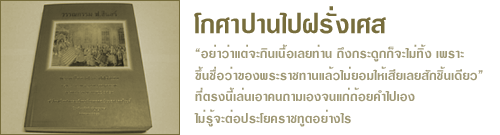
<style>
.page{position:relative;width:500px;height:135px;background:#ffffff}
.page>*{position:absolute;margin:0}
.t1{font:36px "DSELardPhrao";letter-spacing:0.01em;color:#776d3c}
.t2{font:18px "DSELardPhrao";letter-spacing:0.01em;color:#a09976}
</style>
<div class="page">
<p class="t1" style="left:194px;top:6px;width:192px;height:28px">â¡ÈÒ»Ò¹ä»½ÃÑè§àÈÊ</p>
<p class="t2" style="left:194px;top:44px;width:289px;height:83px">“ÍÂèÒÇèÒáµè¨Ð¡Ô¹à¹×éÍàÅÂ·èÒ¹ ¶Ö§¡ÃÐ´Ù¡¡ç¨ÐäÁè·Ôé§ à¾ÃÒÐ<br>¢Öé¹ª×èÍÇèÒ¢Í§¾ÃÐÃÒª·Ò¹áÅéÇäÁèÂÍÁãËéàÊÕÂàÅÂÊÑ¡ªÔé¹à´ÕÂÇ” <br>·ÕèµÃ§¹ÕéàÅè¹àÍÒ¤¹¶ÒÁàÍ§¨¹á¡è¶éÍÂ¤Óä»àÍ§ <br>äÁèÃÙé¨ÐµèÍ»ÃÐâÂ¤ÃÒª·ÙµÍÂèÒ§äÃ</p>
</div>
